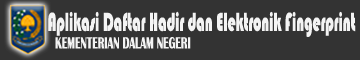
<style>
.page{position:relative;width:360px;height:60px;background:#333333}
.page>*{position:absolute;margin:0}
.t1{font:26.8px "Bauhaus93";color:#f4f4f4;scale:0.55 1}
.t2{font:16.6px "BritannicBold";color:#f4f4f4;scale:0.63 1}
</style>
<div class="page">
<p class="t1" style="left:48px;top:11px;width:308px;height:26px">Aplikasi Daftar Hadir dan Elektronik Fingerprint</p>
<p class="t2" style="left:55px;top:37px;width:136px;height:12px">KEMENTERIAN DALAM NEGERI</p>
</div>
